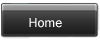
<style>
.page{position:relative;width:100px;height:41px}
.page>*{position:absolute;margin:0}
.t1{font:14px "Raavi";color:#fefefe}
</style>
<div class="page">
<p class="t1" style="left:29px;top:18px;width:33px;height:10px">Home</p>
</div>
